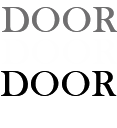
<style>
.page{position:relative;width:117px;height:128px;background:#ffffff}
.page>*{position:absolute;margin:0}
.t1{font:38px "BaskOldFace";color:#706f70}
.t2{font:38px "BaskOldFace";color:#000000}
</style>
<div class="page">
<p class="t1" style="left:2px;top:7px;width:116px;height:25px">DOOR</p>
<p class="t2" style="left:1px;top:71px;width:116px;height:25px">DOOR</p>
</div>
